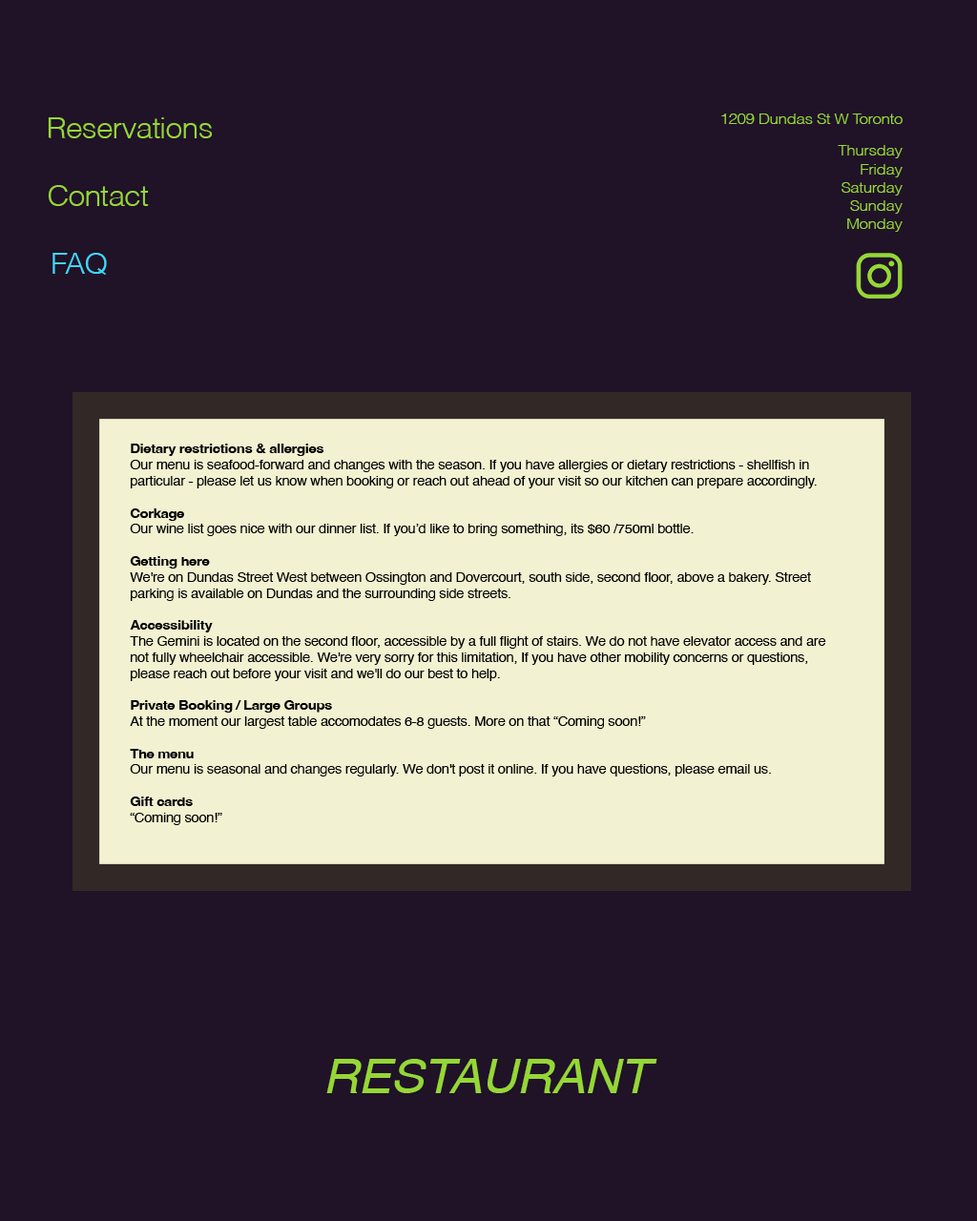
<style>
.page{position:relative;width:977px;height:1221px;background:#201227}
.page>*{position:absolute;margin:0}
.t1{font:15.3px "Helvetica-Light";letter-spacing:-0.02em;color:#95d736;scale:1.05 1}
.t2{font:28.6px "Helvetica-Light";letter-spacing:-0.02em;color:#95d736;scale:1.05 1}
.t3{font:28.6px "Helvetica-Light";letter-spacing:-0.02em;color:#3ed8f9;scale:1.05 1}
.t4{font:13.4px "Helvetica";letter-spacing:-0.02em;color:#000000;scale:1.05 1}
.t5{font:13.4px "Helvetica-Bold";letter-spacing:-0.02em;color:#000000;scale:1.05 1}
.t6{font:47.7px "Helvetica-Oblique";letter-spacing:-0.02em;color:#95d736;scale:1.05 1}
</style>
<div class="page">
<p class="t1" style="left:721px;top:114px;width:181px;height:10px">1209 Dundas St W Toronto</p>
<p class="t2" style="left:48px;top:117px;width:165px;height:21px">Reservations</p>
<p class="t1" style="left:837px;top:145px;width:65px;height:87px;text-align:right">Thursday<br>Friday<br>Saturday<br>Sunday<br>Monday</p>
<p class="t2" style="left:48px;top:185px;width:101px;height:21px">Contact</p>
<p class="t3" style="left:52px;top:253px;width:55px;height:22px">FAQ</p>
<p class="t4" style="left:130px;top:444px;width:696px;height:381px"><span class="t5">Dietary restrictions &amp; allergies<br></span>Our menu is seafood-forward and changes with the season. If you have allergies or dietary restrictions - shellfish in particular - please let us know when booking or reach out ahead of your visit so our kitchen can prepare accordingly.<br><br><span class="t5">Corkage<br></span>Our wine list goes nice with our dinner list. If you’d like to bring something, its $60 /750ml bottle.<br><br><span class="t5">Getting here<br></span>We're on Dundas Street West between Ossington and Dovercourt, south side, second floor, above a bakery. Street parking is available on Dundas and the surrounding side streets. <br><br><span class="t5">Accessibility<br></span>The Gemini is located on the second floor, accessible by a full flight of stairs. We do not have elevator access and are not fully wheelchair accessible. We're very sorry for this limitation, If you have other mobility concerns or questions, please reach out before your visit and we'll do our best to help.<br><br><span class="t5">Private Booking / Large Groups<br></span>At the moment our largest table accomodates 6-8 guests. More on that “Coming soon!”<br><br><span class="t5">The menu<br></span>Our menu is seasonal and changes regularly. We don't post it online. If you have questions, please email us.<br><br><span class="t5">Gift cards<br></span>“Coming soon!”</p>
<p class="t6" style="left:326px;top:1059px;width:331px;height:34px">RESTAURANT</p>
</div>
